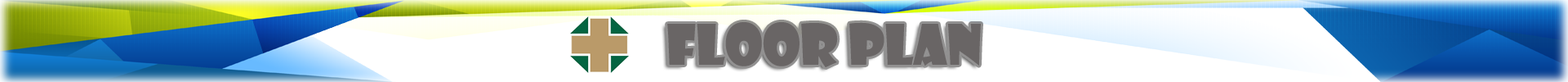
<style>
.page{position:relative;width:1568px;height:82px;background:#ffffff}
.page>*{position:absolute;margin:0}
.t1{font:54.4px "ShowcardGothic-Reg";color:#696565}
</style>
<div class="page">
<p class="t1" style="left:667px;top:22px;width:314px;height:45px">Floor Plan</p>
</div>
